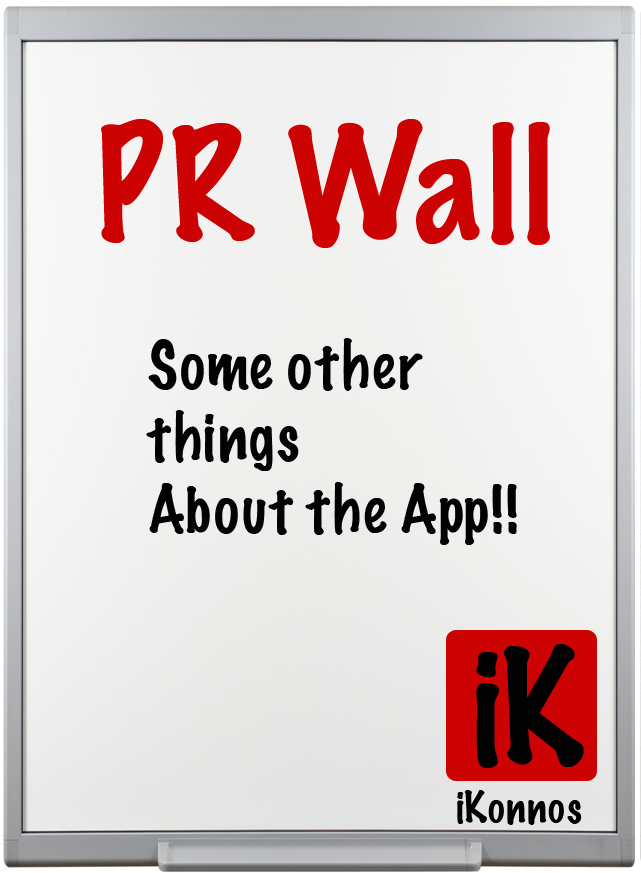
<style>
.page{position:relative;width:641px;height:873px}
.page>*{position:absolute;margin:0}
.t1{font:144px "MarkerFelt-Thin";color:#cd0202}
.t2{font:60px "MarkerFelt-Thin";color:#020202}
.t3{font:144px "MarkerFelt-Thin";color:#020202}
.t4{font:40px "MarkerFelt-Thin";color:#020202}
</style>
<div class="page">
<p class="t1" style="left:101px;top:119px;width:449px;height:129px">PR Wall</p>
<p class="t2" style="left:146px;top:338px;width:371px;height:207px">Some other<br>things<br>About the App!!</p>
<p class="t3" style="left:476px;top:644px;width:108px;height:125px">iK</p>
<p class="t4" style="left:457px;top:790px;width:125px;height:35px">iKonnos</p>
</div>
